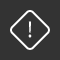
<style>
.page{position:relative;width:60px;height:60px;background:#333333}
.page>*{position:absolute;margin:0}
.t1{font:22px "OpenSans";color:#ffffff}
</style>
<div class="page">
<p class="t1" style="left:28px;top:21px;width:4px;height:17px">!</p>
</div>
